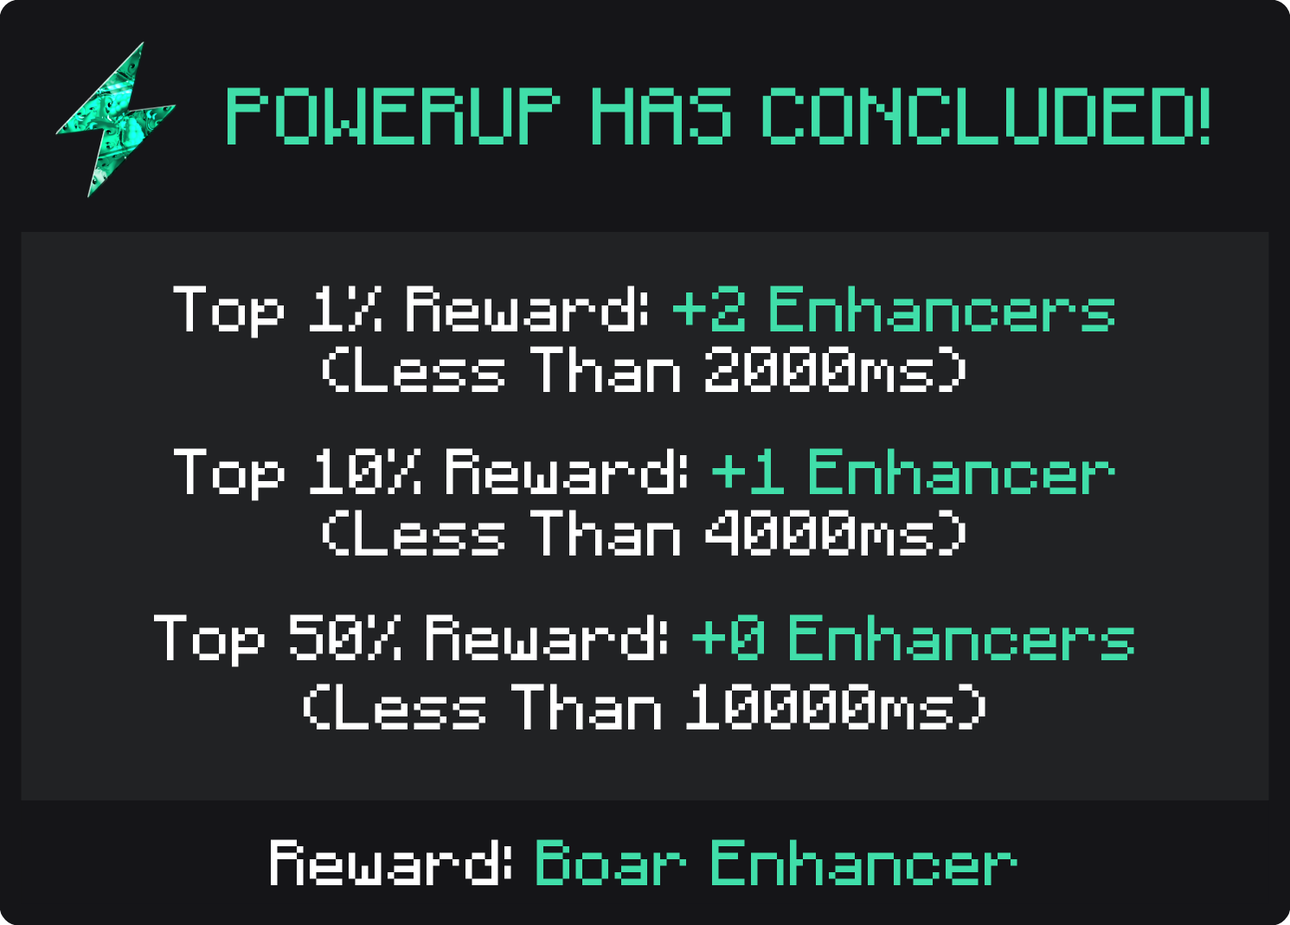
<style>
.page{position:relative;width:1290px;height:925px;background:#212224}
.page>*{position:absolute;margin:0}
.t1{font:64.9px "F77-Minecraft";color:#40dea9}
.t2{font:51.9px "F77-Minecraft";color:#ffffff}
.t3{font:51.9px "F77-Minecraft";color:#40dea9}
</style>
<div class="page">
<p class="t1" style="left:227px;top:87px;width:982px;height:57px">POWERUP HAS CONCLUDED!</p>
<p class="t2" style="left:173px;top:285px;width:941px;height:53px">Top 1% Reward: <span class="t3">+2 Enhancers</span></p>
<p class="t2" style="left:323px;top:346px;width:642px;height:46px">(Less Than 2000ms)</p>
<p class="t2" style="left:174px;top:448px;width:941px;height:53px">Top 10% Reward: <span class="t3">+1 Enhancer</span></p>
<p class="t2" style="left:323px;top:509px;width:642px;height:46px">(Less Than 4000ms)</p>
<p class="t2" style="left:154px;top:614px;width:980px;height:53px">Top 50% Reward: <span class="t3">+0 Enhancers</span></p>
<p class="t2" style="left:304px;top:683px;width:681px;height:46px">(Less Than 10000ms)</p>
<p class="t3" style="left:271px;top:839px;width:746px;height:46px"><span class="t2">Reward: </span>Boar Enhancer</p>
</div>
